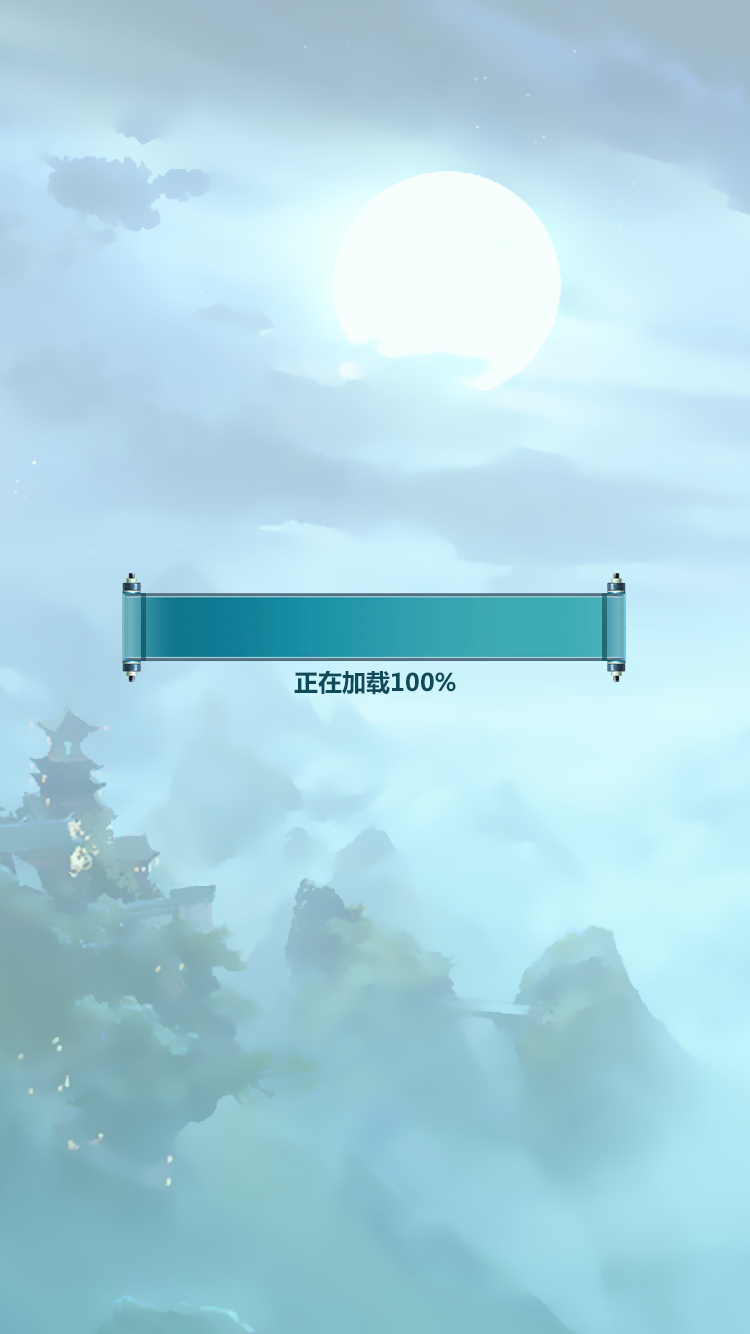
<style>
.page{position:relative;width:750px;height:1334px}
.page>*{position:absolute;margin:0}
.t1{font:24px "MicrosoftYaHei-Bold";color:#0e4a58}
</style>
<div class="page">
<p class="t1" style="left:294px;top:670px;width:162px;height:25px">正在加载100%</p>
</div>
